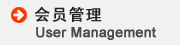
<style>
.page{position:relative;width:180px;height:45px;background:#f1f1f1}
.page>*{position:absolute;margin:0}
.t1{font:16px "SimHei";letter-spacing:0.05em;color:#242424;font-weight:bold}
.t2{font:14px "ArialMT";color:#4b4b4b;font-weight:bold}
</style>
<div class="page">
<p class="t1" style="left:35px;top:6px;width:67px;height:16px">会员管理</p>
<p class="t2" style="left:36px;top:27px;width:120px;height:13px">User Management</p>
</div>
